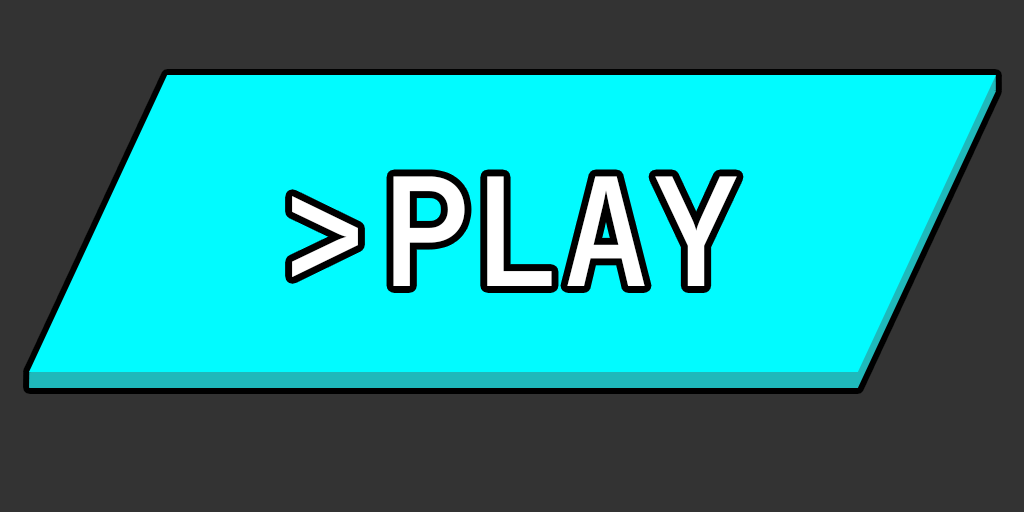
<style>
.page{position:relative;width:1024px;height:512px;background:#333333}
.page>*{position:absolute;margin:0}
.t1{font:150px "JetBrainsMonoRoman-Medium";color:#ffffff}
</style>
<div class="page">
<p class="t1" style="left:292px;top:176px;width:445px;height:110px">PLAY</p>
</div>
